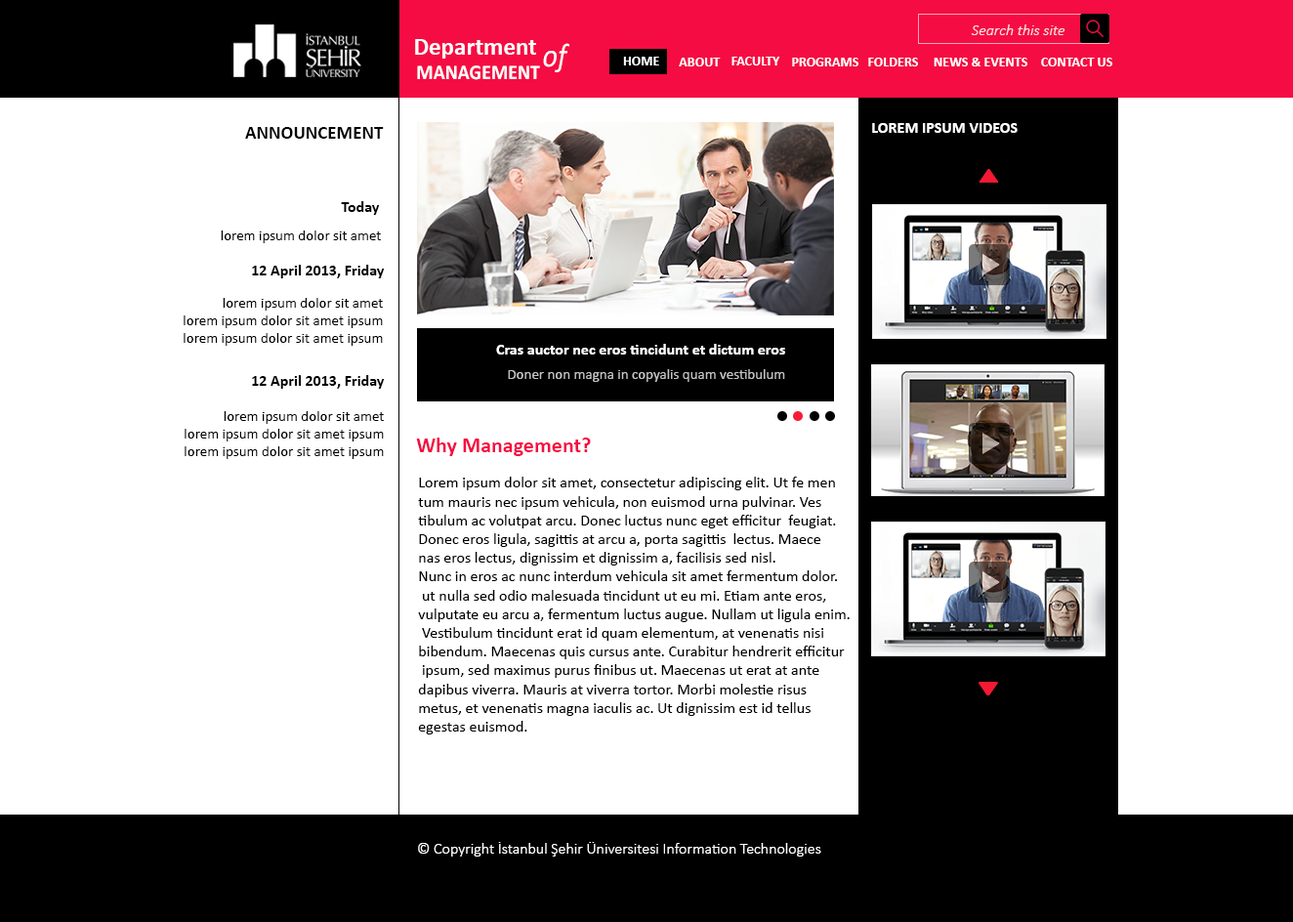
<style>
.page{position:relative;width:1293px;height:922px;background:#ffffff}
.page>*{position:absolute;margin:0}
.t1{font:15.6px "Calibri-LightItalic";color:#fddee2}
.t2{font:24.4px "Calibri-Bold";color:#ffffff}
.t3{font:33.2px "Calibri-Italic";color:#ffffff;scale:0.89 1}
.t4{font:21.1px "Calibri-Bold";color:#ffffff;scale:0.92 1}
.t5{font:13.7px "Calibri-Bold";color:#ffffff}
.t6{font:15.6px "Calibri-Bold";color:#ffffff}
.t7{font:18.6px "Calibri-Bold";color:#000000}
.t8{font:15.6px "Calibri-Bold";color:#000000}
.t9{font:14.7px "Calibri";color:#000000}
.t10{font:14.7px "Calibri";color:#c2c2c2}
.t11{font:21.5px "Calibri-Bold";color:#f50c43}
.t12{font:15.6px "Calibri";color:#000000}
.t13{font:15.6px "Calibri-Light";color:#ffffff}
</style>
<div class="page">
<p class="t1" style="left:971px;top:24px;width:95px;height:11px">Search this site</p>
<p class="t2" style="left:415px;top:39px;width:121px;height:20px">Department</p>
<p class="t3" style="left:543px;top:43px;width:26px;height:29px">of</p>
<p class="t4" style="left:417px;top:65px;width:123px;height:15px">MANAGEMENT</p>
<p class="t5" style="left:623px;top:57px;width:36px;height:8px">HOME</p>
<p class="t5" style="left:679px;top:58px;width:42px;height:8px">ABOUT</p>
<p class="t5" style="left:732px;top:57px;width:48px;height:8px">FACULTY</p>
<p class="t5" style="left:792px;top:58px;width:67px;height:8px">PROGRAMS</p>
<p class="t5" style="left:868px;top:58px;width:50px;height:8px">FOLDERS</p>
<p class="t5" style="left:934px;top:58px;width:94px;height:8px">NEWS &amp; EVENTS</p>
<p class="t5" style="left:1041px;top:58px;width:72px;height:8px">CONTACT US</p>
<p class="t6" style="left:872px;top:123px;width:146px;height:10px">LOREM IPSUM VIDEOS</p>
<p class="t7" style="left:245px;top:127px;width:139px;height:12px">ANNOUNCEMENT</p>
<p class="t8" style="left:341px;top:201px;width:39px;height:14px">Today</p>
<p class="t9" style="left:221px;top:231px;width:160px;height:12px">lorem ipsum dolor sit amet</p>
<p class="t8" style="left:252px;top:265px;width:133px;height:13px">12 April 2013, Friday</p>
<p class="t9" style="left:184px;top:298px;width:199px;height:48px;text-align:right">lorem ipsum dolor sit amet<br>lorem ipsum dolor sit amet ipsum<br>lorem ipsum dolor sit amet ipsum</p>
<p class="t6" style="left:496px;top:344px;width:289px;height:11px">Cras auctor nec eros tincidunt et dictum eros</p>
<p class="t8" style="left:252px;top:375px;width:133px;height:14px">12 April 2013, Friday</p>
<p class="t10" style="left:508px;top:369px;width:277px;height:13px">Doner non magna in copyalis quam vestibulum</p>
<p class="t9" style="left:185px;top:411px;width:199px;height:48px;text-align:right">lorem ipsum dolor sit amet<br>lorem ipsum dolor sit amet ipsum<br>lorem ipsum dolor sit amet ipsum</p>
<p class="t11" style="left:416px;top:438px;width:175px;height:18px">Why Management?</p>
<p class="t12" style="left:418px;top:477px;width:432px;height:258px">Lorem ipsum dolor sit amet, consectetur adipiscing elit. Ut fe men<br>tum mauris nec ipsum vehicula, non euismod urna pulvinar. Ves <br>tibulum ac volutpat arcu. Donec luctus nunc eget efficitur  feugiat. <br>Donec eros ligula, sagittis at arcu a, porta sagittis  lectus. Maece<br>nas eros lectus, dignissim et dignissim a, facilisis sed nisl. <br>Nunc in eros ac nunc interdum vehicula sit amet fermentum dolor. <br> ut nulla sed odio malesuada tincidunt ut eu mi. Etiam ante eros, <br>vulputate eu arcu a, fermentum luctus augue. Nullam ut ligula enim.<br> Vestibulum tincidunt erat id quam elementum, at venenatis nisi <br>bibendum. Maecenas quis cursus ante. Curabitur hendrerit efficitur<br> ipsum, sed maximus purus finibus ut. Maecenas ut erat at ante <br>dapibus viverra. Mauris at viverra tortor. Morbi molestie risus <br>metus, et venenatis magna iaculis ac. Ut dignissim est id tellus <br>egestas euismod.</p>
<p class="t13" style="left:418px;top:842px;width:403px;height:15px">© Copyright İstanbul Şehir Üniversitesi Information Technologies</p>
</div>
